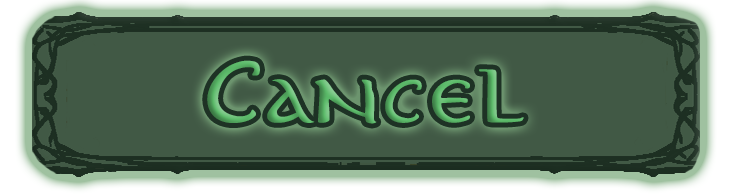
<style>
.page{position:relative;width:732px;height:195px;background:#415945}
.page>*{position:absolute;margin:0}
.t1{font:86.4px "MiddleEarth";color:#5bba69}
</style>
<div class="page">
<p class="t1" style="left:207px;top:60px;width:317px;height:64px">Cancel</p>
</div>
